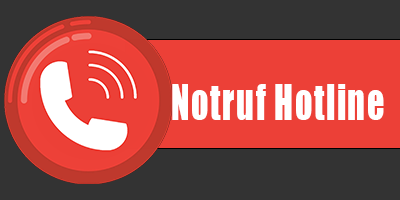
<style>
.page{position:relative;width:400px;height:200px;background:#333333}
.page>*{position:absolute;margin:0}
.t1{font:79.6px "Impact";letter-spacing:0.04em;color:#ffffff;scale:0.74 1}
</style>
<div class="page">
<p class="t1" style="left:172px;top:84px;width:212px;height:36px">Notruf Hotline</p>
</div>
